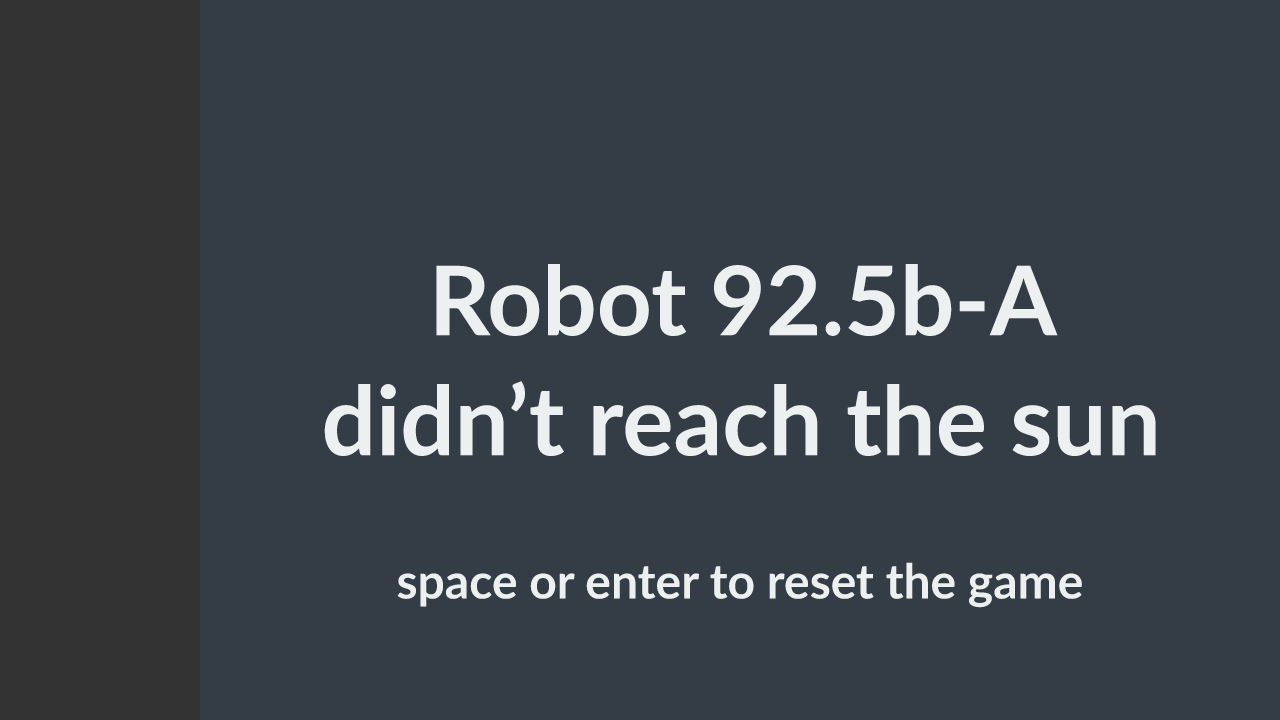
<style>
.page{position:relative;width:1280px;height:720px;background:#343c45}
.page>*{position:absolute;margin:0}
.t1{font:96px/120px "Lato-Bold";color:#ecf0f1}
.t2{font:48px "Lato-Bold";color:#ecf0f1}
</style>
<div class="page">
<p class="t1" style="left:324px;top:264px;width:832px;height:192px;text-align:center">Robot 92.5b-A<br>didn’t reach the sun</p>
<p class="t2" style="left:397px;top:562px;width:685px;height:46px">space or enter to reset the game</p>
</div>
